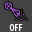
<style>
.page{position:relative;width:32px;height:32px;background:#444444}
.page>*{position:absolute;margin:0}
.t1{font:10px "MyriadPro-Cond";color:#ffffff;scale:1.14 1}
</style>
<div class="page">
<p class="t1" style="left:9px;top:24px;width:14px;height:7px">OFF</p>
</div>
